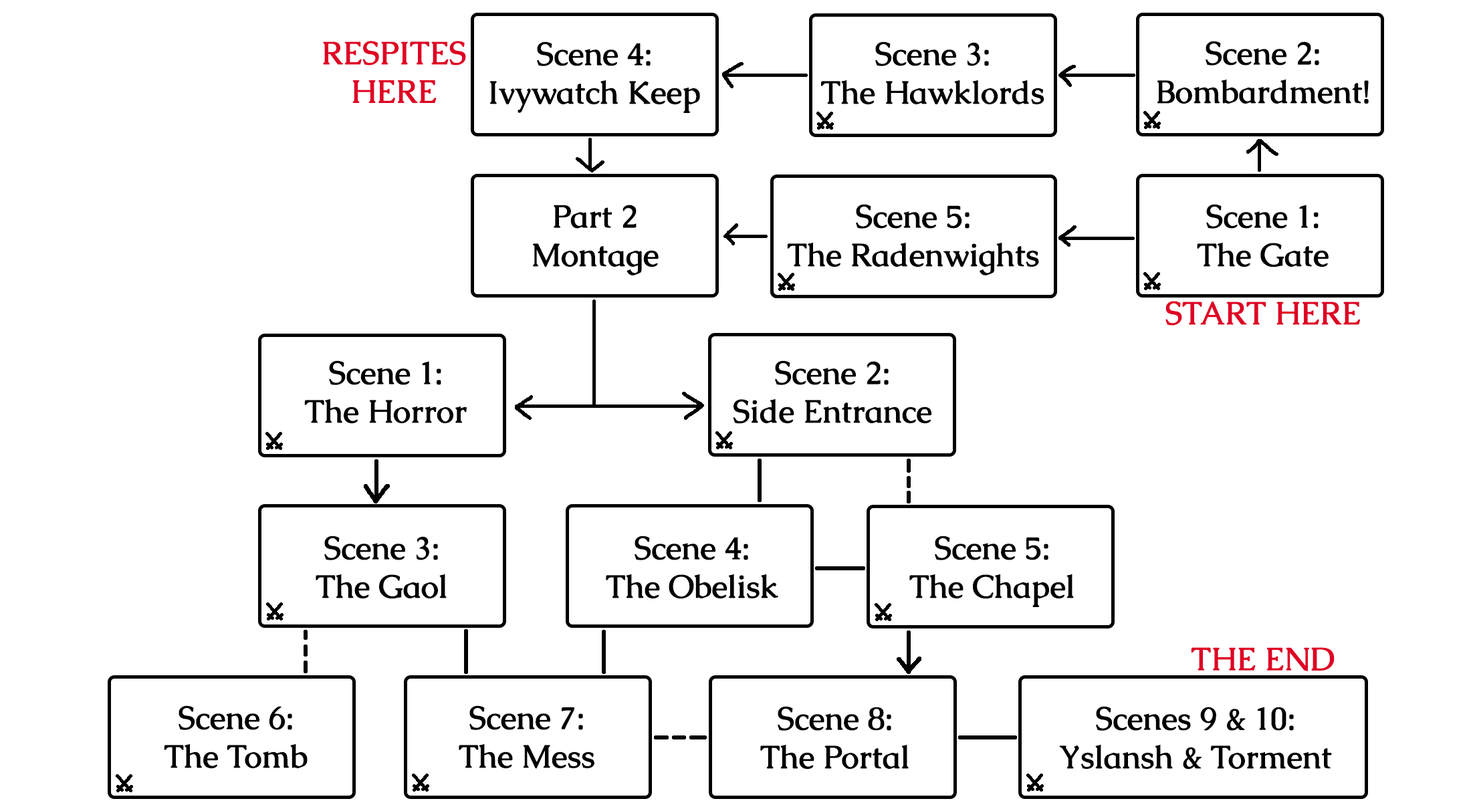
<style>
.page{position:relative;width:1471px;height:811px;background:#ffffff}
.page>*{position:absolute;margin:0}
.t1{font:32.1px "Caudex-Bold";color:#df0024}
.t2{font:32.1px "Caudex-Bold";color:#000000}
</style>
<div class="page">
<p class="t1" style="left:323px;top:41px;width:143px;height:62px;text-align:center">RESPITES<br>HERE</p>
<p class="t2" style="left:489px;top:41px;width:211px;height:72px;text-align:center">Scene 4:<br>Ivywatch Keep</p>
<p class="t2" style="left:821px;top:41px;width:223px;height:64px;text-align:center">Scene 3:<br>The Hawklords</p>
<p class="t2" style="left:1156px;top:41px;width:212px;height:63px;text-align:center">Scene 2:<br>Bombardment!</p>
<p class="t2" style="left:532px;top:205px;width:126px;height:70px;text-align:center">Part 2<br>Montage</p>
<p class="t2" style="left:787px;top:204px;width:252px;height:71px;text-align:center">Scene 5:<br>The Radenwights</p>
<p class="t2" style="left:1197px;top:204px;width:131px;height:63px;text-align:center">Scene 1:<br>The Gate</p>
<p class="t1" style="left:1165px;top:301px;width:195px;height:25px">START HERE</p>
<p class="t2" style="left:304px;top:360px;width:163px;height:64px;text-align:center">Scene 1:<br>The Horror</p>
<p class="t2" style="left:733px;top:360px;width:199px;height:64px;text-align:center">Scene 2:<br>Side Entrance</p>
<p class="t2" style="left:316px;top:535px;width:131px;height:64px;text-align:center">Scene 3:<br>The Gaol</p>
<p class="t2" style="left:606px;top:535px;width:172px;height:64px;text-align:center">Scene 4:<br>The Obelisk</p>
<p class="t2" style="left:909px;top:535px;width:165px;height:72px;text-align:center">Scene 5:<br>The Chapel</p>
<p class="t1" style="left:1191px;top:647px;width:143px;height:24px">THE END</p>
<p class="t2" style="left:164px;top:705px;width:143px;height:64px;text-align:center">Scene 6:<br>The Tomb</p>
<p class="t2" style="left:459px;top:705px;width:135px;height:64px;text-align:center">Scene 7:<br>The Mess</p>
<p class="t2" style="left:760px;top:706px;width:148px;height:63px;text-align:center">Scene 8:<br>The Portal</p>
<p class="t2" style="left:1059px;top:706px;width:273px;height:63px;text-align:center">Scenes 9 &amp; 10:<br>Yslansh &amp; Torment</p>
</div>
